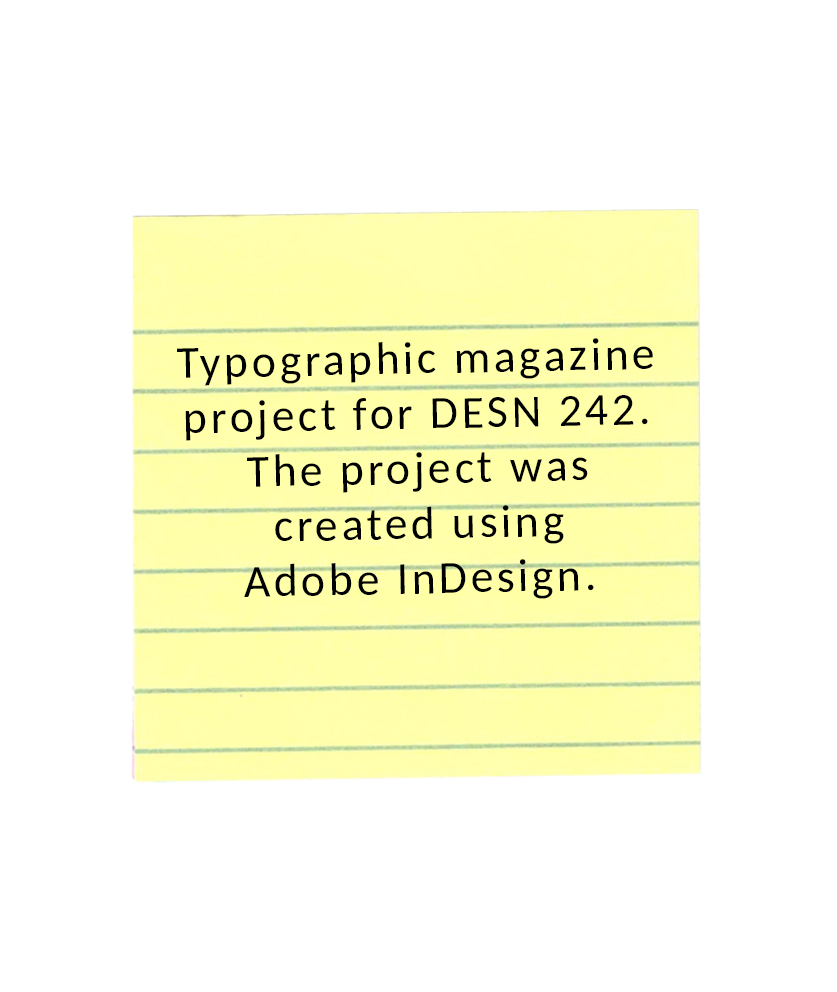
<style>
.page{position:relative;width:837px;height:992px;background:#ffffff}
.page>*{position:absolute;margin:0}
.t1{font:45.8px "Carlito-Regular";letter-spacing:0.075em;color:#000000}
</style>
<div class="page">
<p class="t1" style="left:177px;top:338px;width:476px;height:261px;text-align:center;rotate:-1deg">Typographic magazine project for DESN 242. The project was created using <br>Adobe InDesign.</p>
</div>
